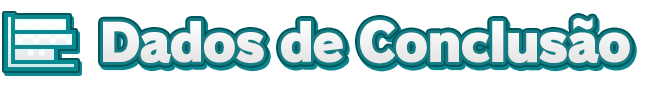
<style>
.page{position:relative;width:650px;height:88px;background:#ffffff}
.page>*{position:absolute;margin:0}
.t1{font:52px "RodinPro-UB";letter-spacing:-0.041em;color:#efefef}
</style>
<div class="page">
<p class="t1" style="left:103px;top:18px;width:527px;height:46px">Dados de Conclusão</p>
</div>
